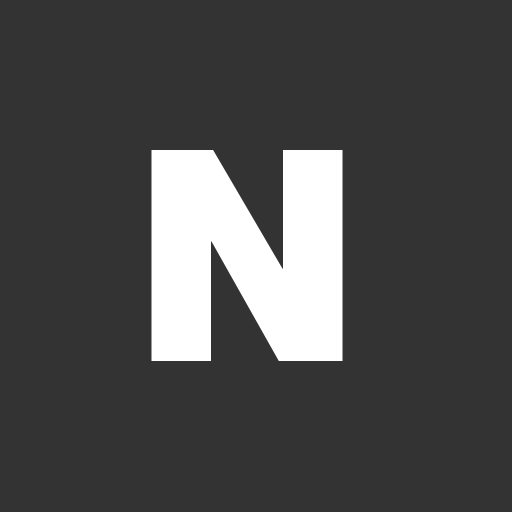
<style>
.page{position:relative;width:512px;height:512px;background:#333333}
.page>*{position:absolute;margin:0}
.t1{font:295px "NHaasGroteskDSPro-95Blk";color:#ffffff}
</style>
<div class="page">
<p class="t1" style="left:151px;top:150px;width:192px;height:211px">N</p>
</div>
